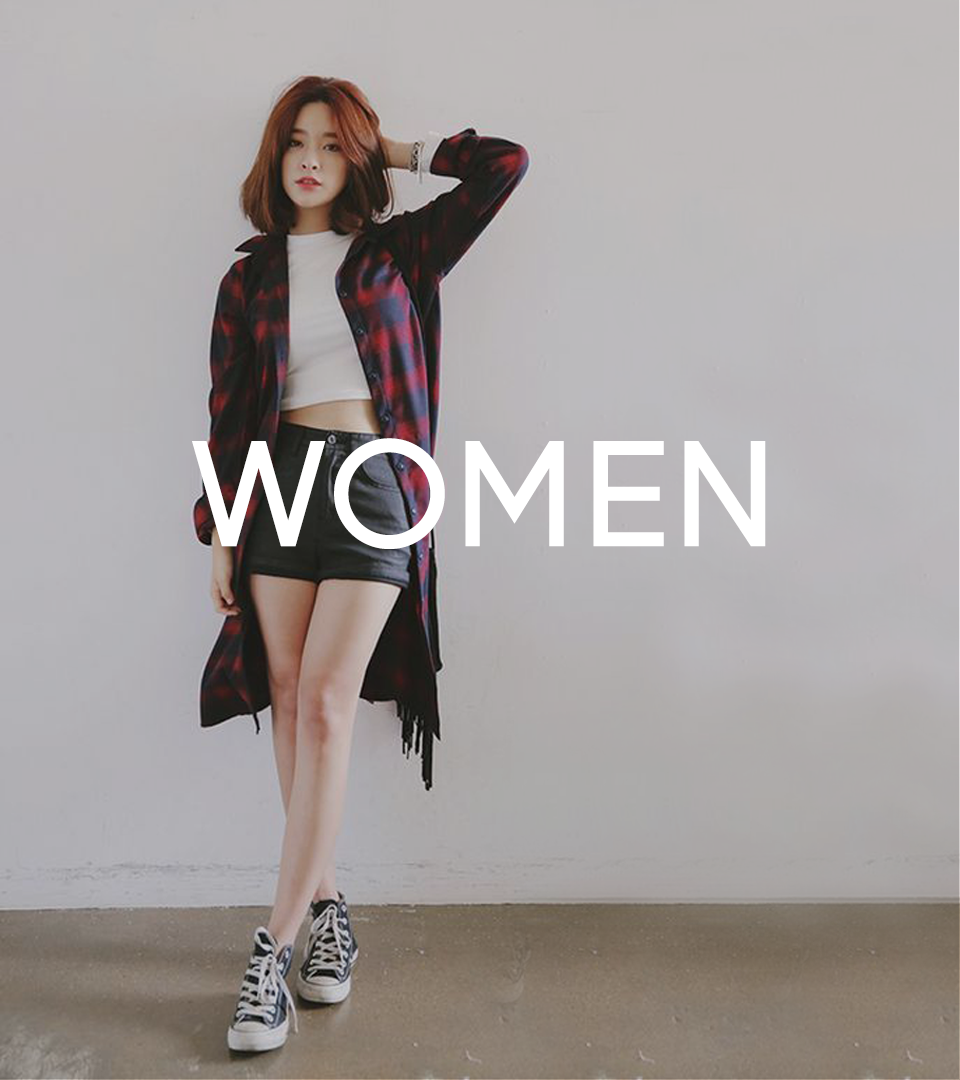
<style>
.page{position:relative;width:960px;height:1080px}
.page>*{position:absolute;margin:0}
.t1{font:150px "Young";color:#ffffff}
</style>
<div class="page">
<p class="t1" style="left:192px;top:438px;width:574px;height:111px">WOMEN</p>
</div>
